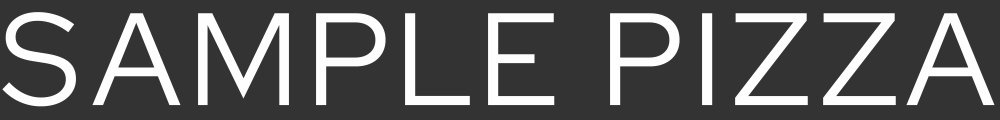
<style>
.page{position:relative;width:1000px;height:120px;background:#333333}
.page>*{position:absolute;margin:0}
.t1{font:131.5px "RedHatDisplayRoman-Regular";letter-spacing:0.05em;color:#fefefe}
</style>
<div class="page">
<p class="t1" style="left:2px;top:12px;width:993px;height:95px">SAMPLE PIZZA</p>
</div>
